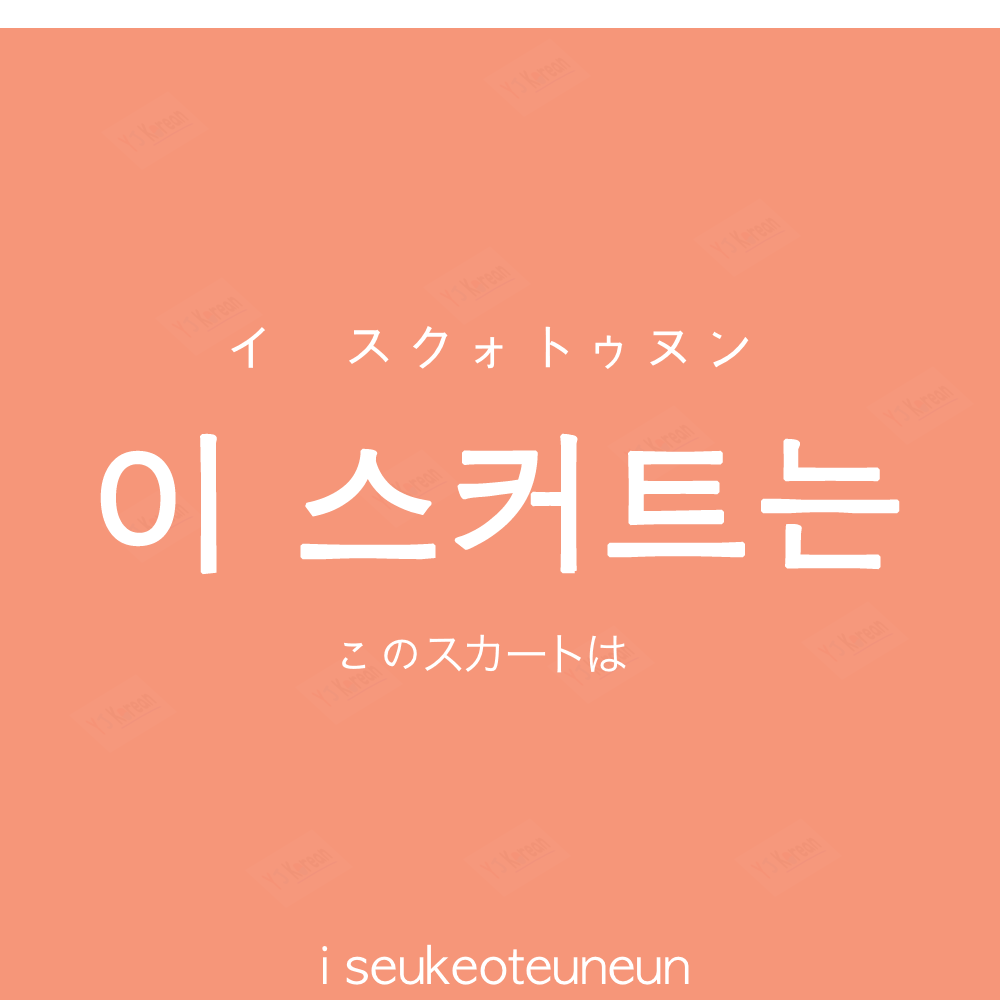
<style>
.page{position:relative;width:1000px;height:1000px;background:#f69679}
.page>*{position:absolute;margin:0}
.t1{font:60px "AppleGothic";color:#ffffff}
.t2{font:150px "AppleGothic";color:#ffffff;font-weight:bold}
.t3{font:45px "HiraKakuProN-W3";color:#ffffff}
.t4{font:45px "AppleGothic";color:#ffffff}
.t5{font:50px "AppleGothic";color:#ffffff}
</style>
<div class="page">
<p class="t1" style="left:231px;top:326px;width:518px;height:43px">イ　スクォトゥヌン</p>
<p class="t2" style="left:100px;top:433px;width:800px;height:142px">이 스커트는</p>
<p class="t3" style="left:342px;top:634px;width:284px;height:39px"><span class="t4">この</span>スカートは</p>
<p class="t5" style="left:322px;top:944px;width:367px;height:41px">i seukeoteuneun</p>
</div>
